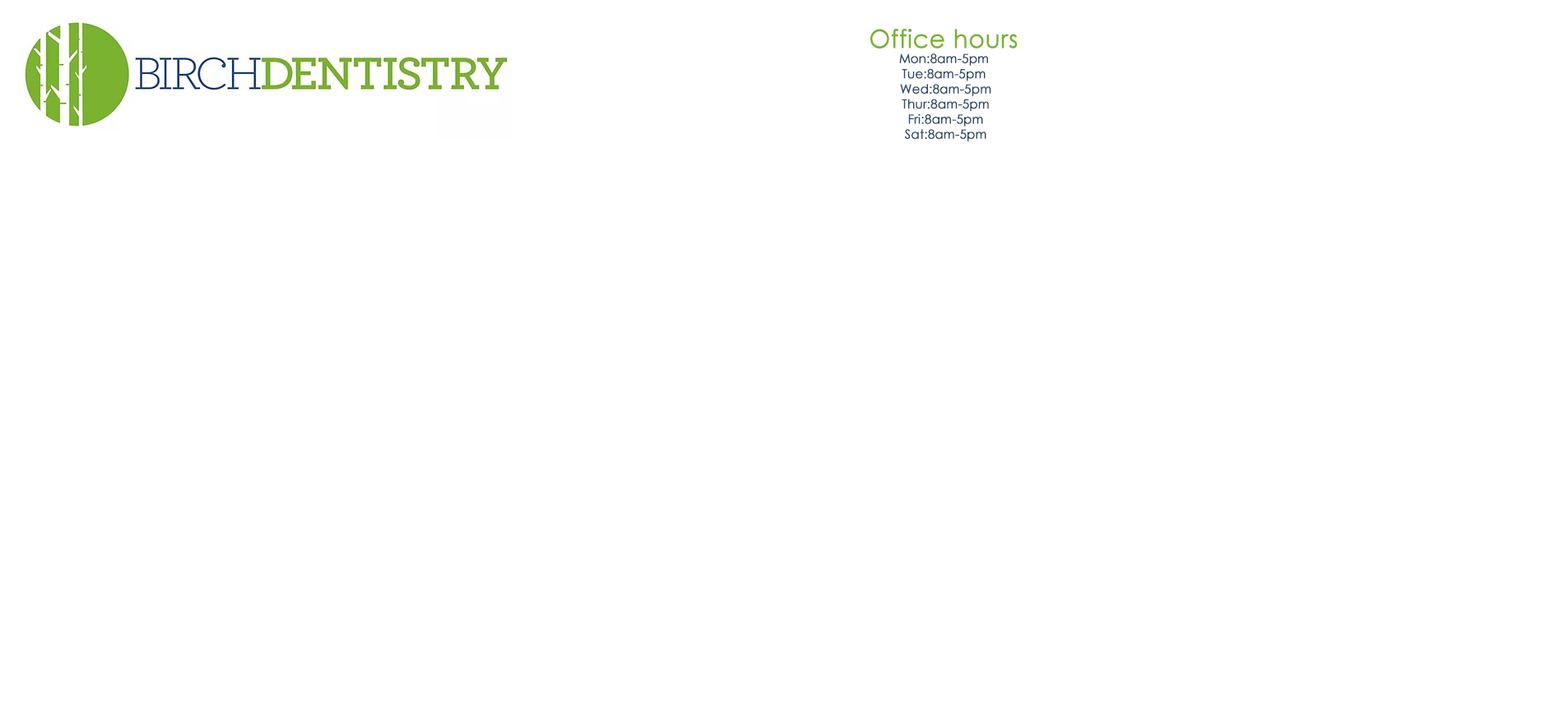
<style>
.page{position:relative;width:1568px;height:722px;background:#ffffff}
.page>*{position:absolute;margin:0}
.t1{font:12.6px "CenturyGothic";color:#2e4a6a;font-weight:bold;scale:0.96 1}
.t2{font:25.2px "CenturyGothic";color:#76b22a;font-weight:bold;scale:0.96 1}
</style>
<div class="page">
<p class="t1" style="left:870px;top:29px;width:148px;height:112px;text-align:center"><span class="t2">Office hours<br></span>Mon:8am-5pm<br>Tue:8am-5pm<br> Wed:8am-5pm<br> Thur:8am-5pm<br> Fri:8am-5pm<br> Sat:8am-5pm</p>
</div>
